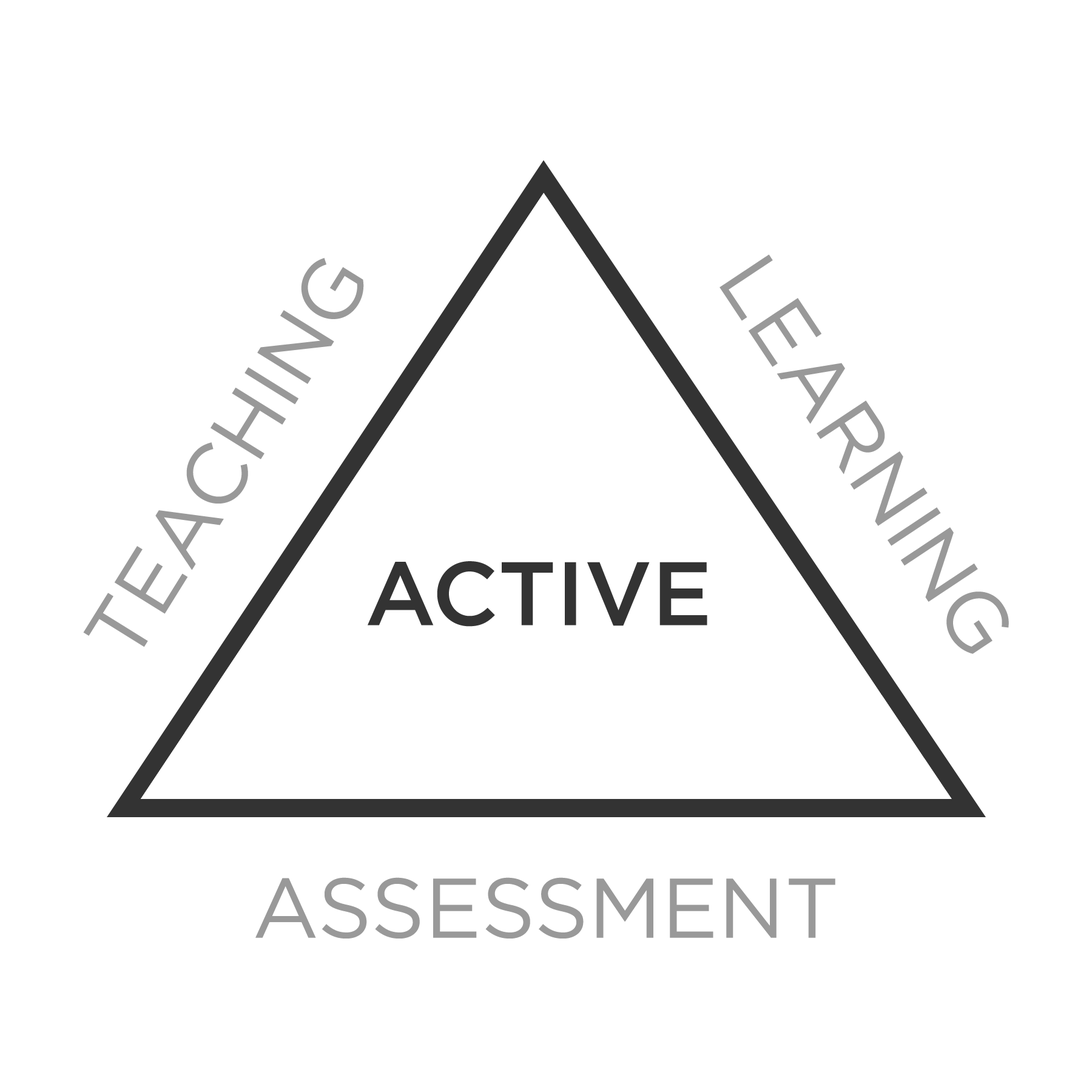
<style>
.page{position:relative;width:1092px;height:1092px;background:#ffffff}
.page>*{position:absolute;margin:0}
.t1{font:84.3px "GothamHTF-Book";color:#999999;text-transform:uppercase}
.t2{font:89.7px "GothamHTF-Medium";color:#333333;text-transform:uppercase}
</style>
<div class="page">
<p class="t1" style="left:83px;top:258px;width:281px;height:389px;rotate:-58deg">Teaching</p>
<p class="t1" style="left:719px;top:254px;width:290px;height:400px;rotate:56deg">Learning</p>
<p class="t2" style="left:368px;top:561px;width:339px;height:66px">Active</p>
<p class="t1" style="left:255px;top:877px;width:580px;height:62px">Assessment</p>
</div>
